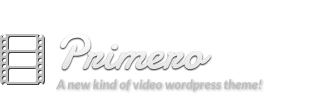
<style>
.page{position:relative;width:328px;height:108px;background:#ffffff}
.page>*{position:absolute;margin:0}
.t1{font:13px "Lato-BoldItalic";color:#bebebe}
</style>
<div class="page">
<p class="t1" style="left:56px;top:79px;width:206px;height:13px">A new kind of video wordpress theme!</p>
</div>
